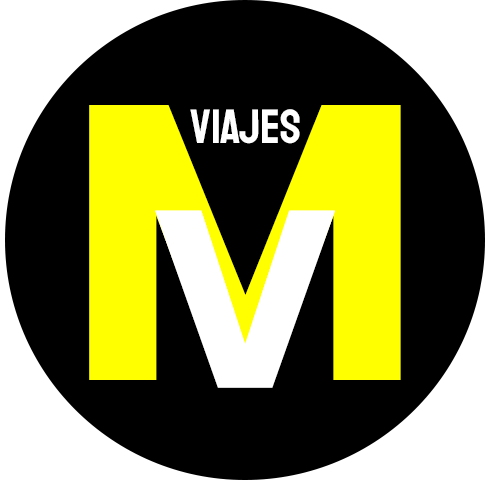
<style>
.page{position:relative;width:486px;height:490px;background:#000000}
.page>*{position:absolute;margin:0}
.t1{font:391.5px "Poppins-Bold";color:#ffff00}
.t2{font:48px "Staatliches-Regular";color:#ffffff}
.t3{font:252.3px "Poppins-Bold";color:#ffffff}
</style>
<div class="page">
<p class="t1" style="left:89px;top:105px;width:312px;height:275px">M</p>
<p class="t2" style="left:190px;top:109px;width:110px;height:35px">VIAJES</p>
<p class="t3" style="left:155px;top:210px;width:180px;height:178px">V</p>
</div>
